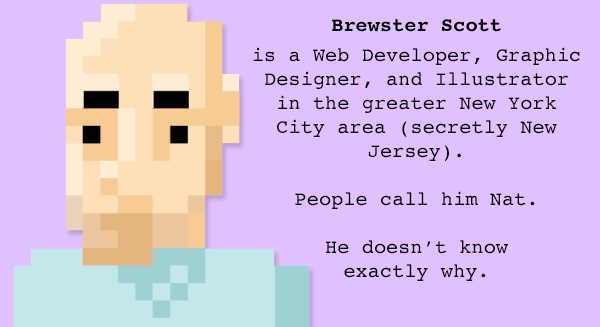
<style>
.page{position:relative;width:600px;height:327px;background:#e1c0ff}
.page>*{position:absolute;margin:0}
.t1{font:20px/24px "Courier";letter-spacing:0.01em;color:#020100}
.t2{font:20px/30px "Courier-Bold";letter-spacing:0.01em;color:#020100}
.t3{font:20px/30px "Courier";letter-spacing:0.01em;color:#020100}
</style>
<div class="page">
<p class="t1" style="left:253px;top:19px;width:327px;height:262px;text-align:center"><span class="t2">Brewster Scott <br></span><span class="t3">is a Web Developer, Graphic </span>Designer, and Illustrator in the greater New York City area (secretly New Jersey). <br><br>People call him Nat. <br><br>He doesn’t know <br>exactly why.</p>
</div>
